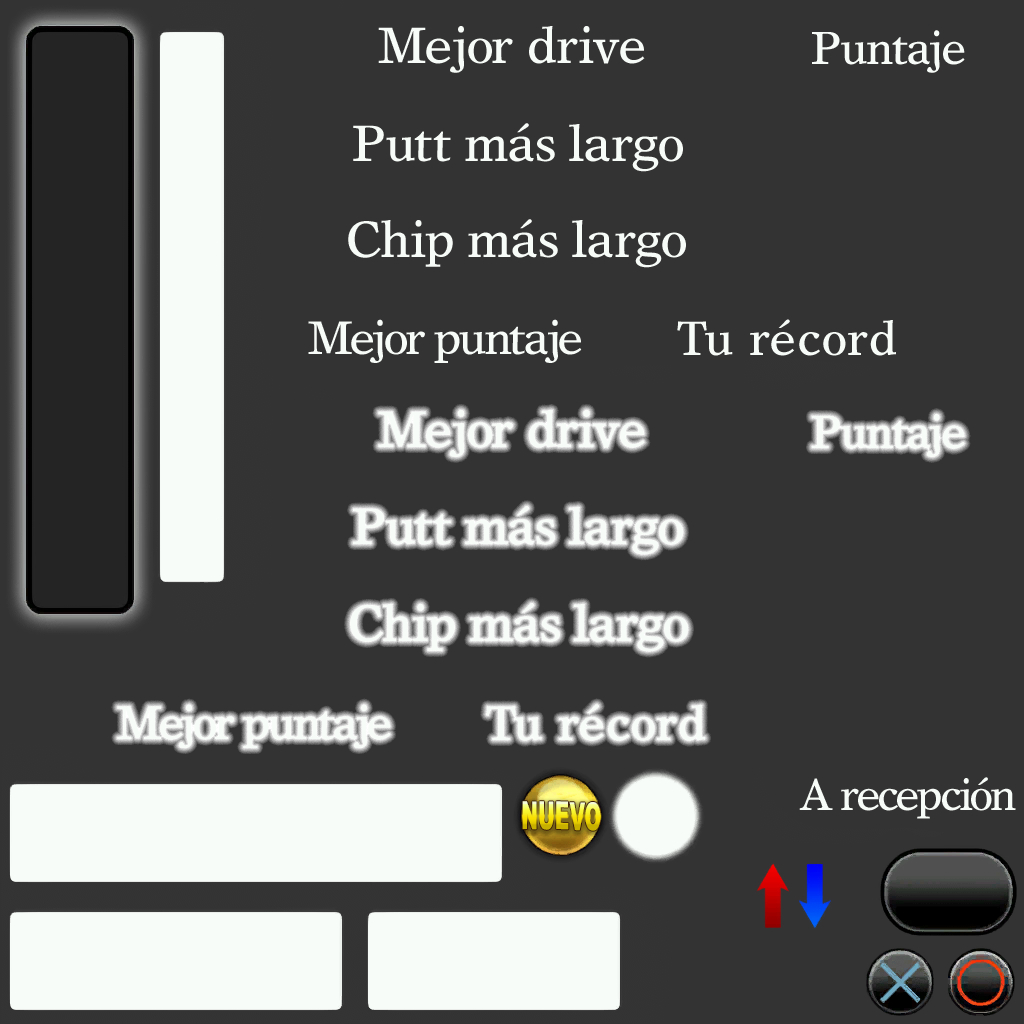
<style>
.page{position:relative;width:1024px;height:1024px;background:#333333}
.page>*{position:absolute;margin:0}
.t1{font:51px "TimesEuropaLTStd-Roman";letter-spacing:-0.02em;color:#f8fcf8}
.t2{font:46.2px "TimesEuropaLTStd-Roman";letter-spacing:-0.04em;color:#f8fcf8}
.t3{font:47.2px "TimesEuropaLTStd-Roman";letter-spacing:-0.06em;color:#f8fcf8}
.t4{font:48.1px "TimesEuropaLTStd-Roman";letter-spacing:0.02em;color:#f8fcf8}
.t5{font:44.3px "TimesEuropaLTStd-Roman";letter-spacing:-0.06em;color:#f8fcf8}
.t6{font:38.7px "ArialCEMTBlack-Regular";letter-spacing:0.005em;scale:0.52 1}
</style>
<div class="page">
<p class="t1" style="left:378px;top:26px;width:267px;height:47px">Mejor drive</p>
<p class="t2" style="left:812px;top:30px;width:153px;height:43px">Puntaje</p>
<p class="t1" style="left:353px;top:123px;width:330px;height:49px">Putt más largo</p>
<p class="t1" style="left:348px;top:219px;width:338px;height:49px">Chip más largo</p>
<p class="t3" style="left:308px;top:319px;width:274px;height:44px">Mejor puntaje</p>
<p class="t4" style="left:677px;top:319px;width:219px;height:37px">Tu récord</p>
<p class="t1" style="left:378px;top:410px;width:267px;height:47px">Mejor drive</p>
<p class="t2" style="left:812px;top:414px;width:153px;height:43px">Puntaje</p>
<p class="t1" style="left:353px;top:506px;width:330px;height:49px">Putt más largo</p>
<p class="t1" style="left:350px;top:603px;width:338px;height:49px">Chip más largo</p>
<p class="t3" style="left:117px;top:704px;width:274px;height:44px">Mejor puntaje</p>
<p class="t4" style="left:486px;top:704px;width:219px;height:37px">Tu récord</p>
<p class="t5" style="left:799px;top:777px;width:217px;height:42px">A recepción</p>
<p class="t6" style="left:522px;top:801px;width:79px;height:30px;rotate:1deg">NUEVO</p>
</div>
